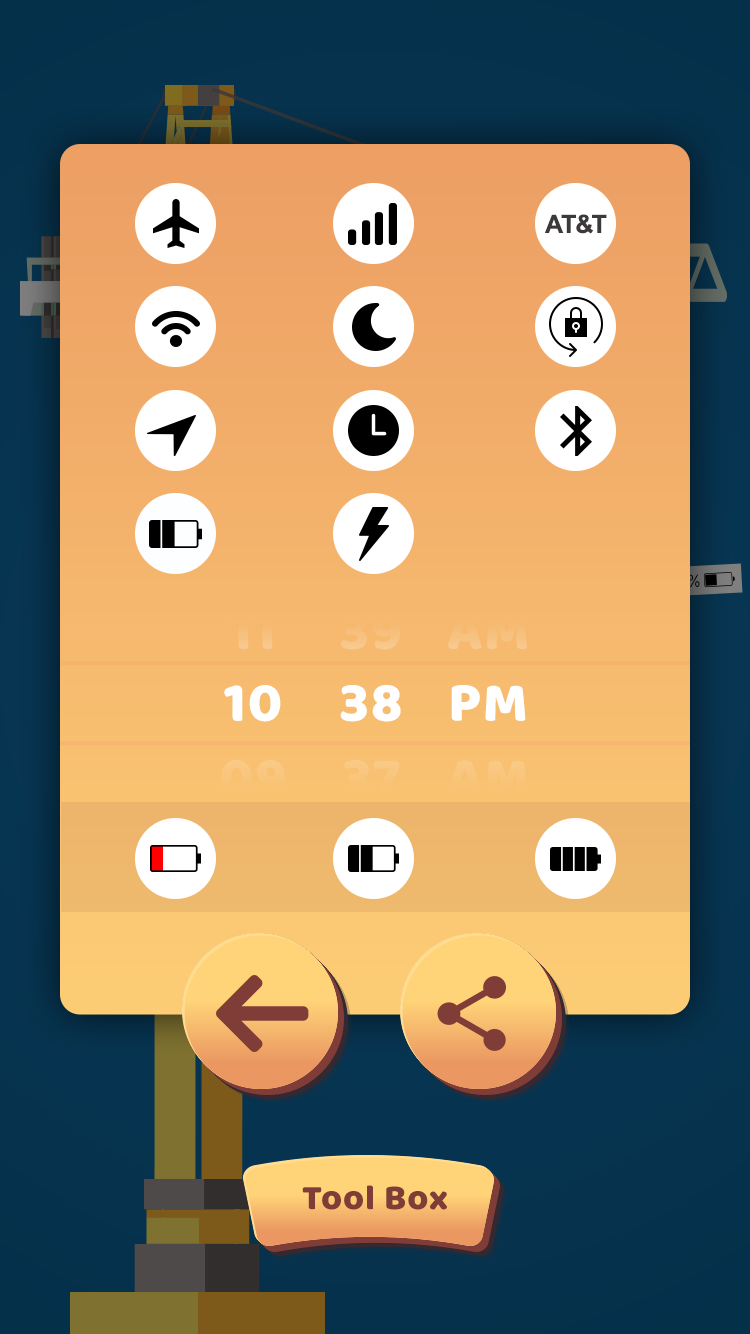
<style>
.page{position:relative;width:750px;height:1334px}
.page>*{position:absolute;margin:0}
.t1{font:25px "Arial-BoldMT";color:#3d3939}
.t2{font:17.4px "SFUIText-Regular";color:#f5b66d;scale:0.86 1}
.t3{font:57px "BalooBhai-Regular";letter-spacing:0.026em;color:#f6bc77}
.t4{font:57px "BalooBhai-Regular";letter-spacing:0.026em;color:#f7be79}
.t5{font:57px "BalooBhai-Regular";letter-spacing:0.026em;color:#f7bf7a}
.t6{font:57px "BalooBhai-Regular";letter-spacing:0.026em;color:#ffffff}
.t7{font:57px "BalooBhai-Regular";letter-spacing:0.026em;color:#f9c57a}
.t8{font:57px "BalooBhai-Regular";letter-spacing:0.026em;color:#f9c57b}
.t9{font:57px "BalooBhai-Regular";letter-spacing:0.026em;color:#f9c579}
.t10{font:36px "BalooBhai-Regular";letter-spacing:0.026em;color:#803c37}
</style>
<div class="page">
<p class="t1" style="left:545px;top:214px;width:62px;height:20px">AT&amp;T</p>
<p class="t2" style="left:666px;top:574px;width:34px;height:15px;rotate:-3deg">58 %</p>
<p class="t3" style="left:230px;top:613px;width:43px;height:36px">11</p>
<p class="t4" style="left:341px;top:613px;width:60px;height:37px">39</p>
<p class="t5" style="left:448px;top:613px;width:79px;height:36px">AM</p>
<p class="t6" style="left:224px;top:685px;width:57px;height:37px">10</p>
<p class="t6" style="left:340px;top:685px;width:61px;height:37px">38</p>
<p class="t6" style="left:451px;top:685px;width:75px;height:36px">PM</p>
<p class="t7" style="left:221px;top:760px;width:64px;height:37px">09</p>
<p class="t8" style="left:343px;top:760px;width:57px;height:37px">37</p>
<p class="t9" style="left:448px;top:760px;width:79px;height:36px">AM</p>
<p class="t10" style="left:302px;top:1185px;width:145px;height:25px">Tool Box</p>
</div>
